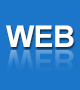
<style>
.page{position:relative;width:80px;height:90px;background:#1b75c8}
.page>*{position:absolute;margin:0}
.t1{font:30px "Arial-BoldMT";letter-spacing:-0.025em;color:#ffffff}
</style>
<div class="page">
<p class="t1" style="left:6px;top:25px;width:68px;height:22px">WEB</p>
</div>
